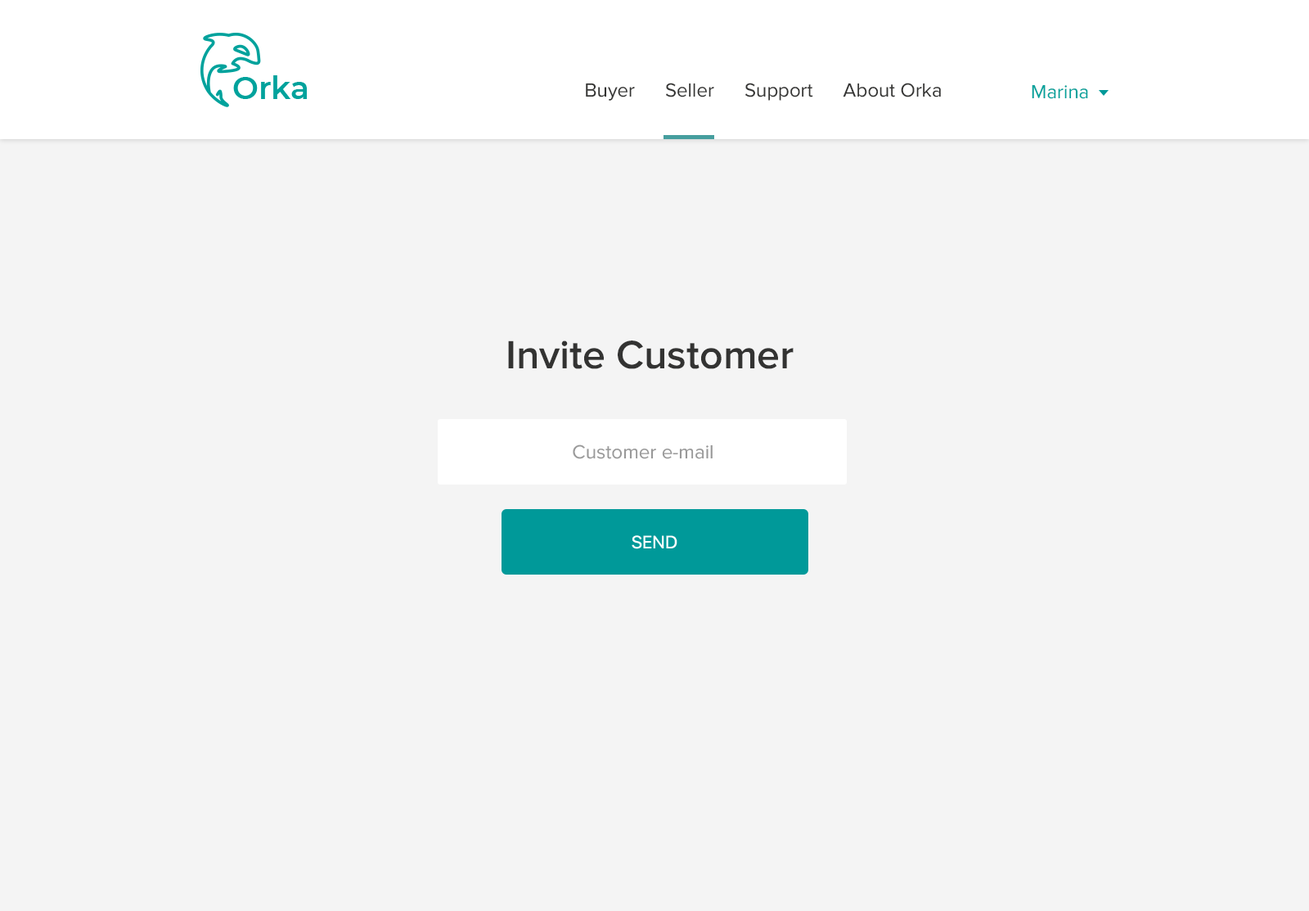
<style>
.page{position:relative;width:1309px;height:911px;background:#f4f4f4}
.page>*{position:absolute;margin:0}
.t1{font:19.6px "ProximaNova-Regular";color:#333332}
.t2{font:19.6px "ProximaNova-Regular";color:#00a29c}
.t3{font:40.9px "ProximaNova-Semibold";color:#333332}
.t4{font:19.6px "ProximaNova-Regular";color:#999999}
.t5{font:18px "SFUIDisplay-Medium";color:#ffffff;text-transform:uppercase}
</style>
<div class="page">
<p class="t1" style="left:586px;top:83px;width:355px;height:18px">Buyer      Seller      Support      About Orka</p>
<p class="t2" style="left:1032px;top:84px;width:56px;height:15px">Marina</p>
<p class="t3" style="left:508px;top:340px;width:286px;height:29px">Invite Customer</p>
<p class="t4" style="left:573px;top:444px;width:140px;height:15px">Customer e-mail</p>
<p class="t5" style="left:632px;top:535px;width:46px;height:14px">send</p>
</div>
